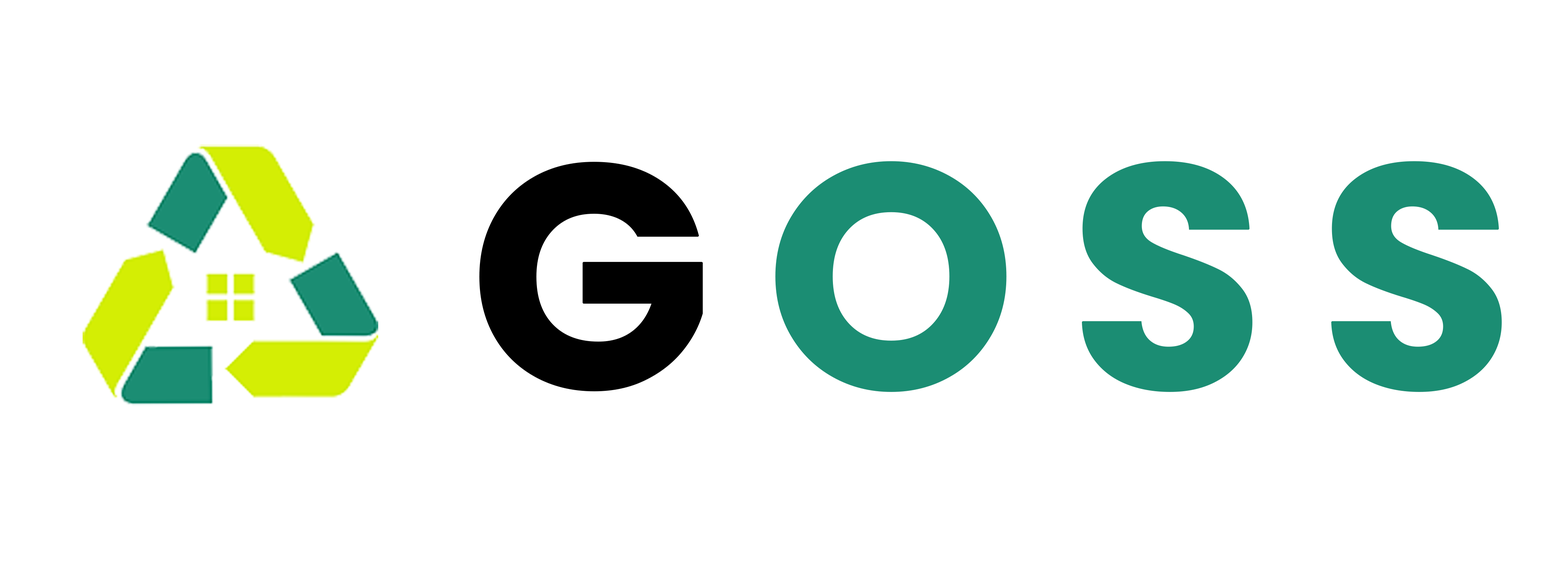
<style>
.page{position:relative;width:1568px;height:561px;background:#ffffff}
.page>*{position:absolute;margin:0}
.t1{font:318.8px "Poppins-Bold";letter-spacing:0.14em;color:#1b8d73;text-transform:uppercase;font-weight:bold}
.t2{font:318.8px "Poppins-Bold";letter-spacing:0.14em;color:#000000;text-transform:uppercase;font-weight:bold}
</style>
<div class="page">
<p class="t1" style="left:479px;top:161px;width:1023px;height:231px"><span class="t2">G</span>oss</p>
</div>
